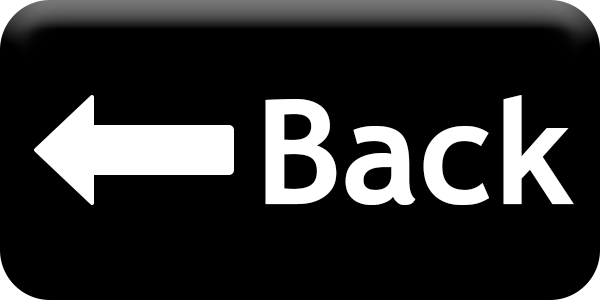
<style>
.page{position:relative;width:600px;height:300px;background:#000000}
.page>*{position:absolute;margin:0}
.t1{font:145.8px "TrebuchetMS-Bold";color:#ffffff}
</style>
<div class="page">
<p class="t1" style="left:265px;top:95px;width:309px;height:110px">Back</p>
</div>
